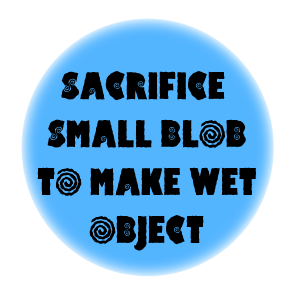
<style>
.page{position:relative;width:300px;height:300px;background:#ffffff}
.page>*{position:absolute;margin:0}
.t1{font:40px "HippoCritic";color:#000000}
</style>
<div class="page">
<p class="t1" style="left:37px;top:71px;width:219px;height:180px;text-align:center">SACRIFICE <br>SMALL BLOB<br>TO MAKE WET<br>OBJECT</p>
</div>
